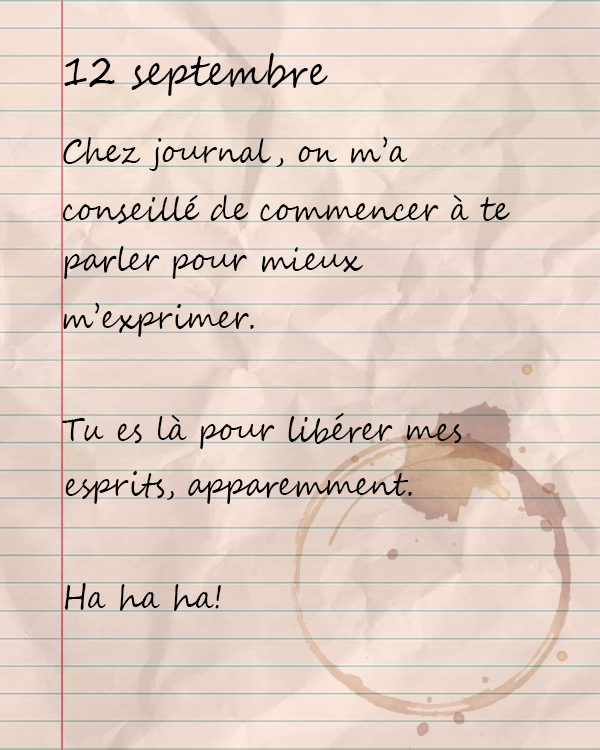
<style>
.page{position:relative;width:600px;height:750px}
.page>*{position:absolute;margin:0}
.t1{font:41.8px "SegoeScript";color:#000000;scale:0.9 1}
.t2{font:33.3px "SegoeScript";color:#000000;scale:0.9 1}
</style>
<div class="page">
<p class="t1" style="left:64px;top:53px;width:264px;height:43px">12 septembre</p>
<p class="t2" style="left:63px;top:136px;width:345px;height:35px">Chez journal, on m’a</p>
<p class="t2" style="left:62px;top:195px;width:448px;height:29px">conseillé de commencer à te</p>
<p class="t2" style="left:64px;top:246px;width:299px;height:33px">parler pour mieux</p>
<p class="t2" style="left:63px;top:302px;width:191px;height:35px">m’exprimer.</p>
<p class="t2" style="left:62px;top:413px;width:400px;height:36px">Tu es là pour libérer mes</p>
<p class="t2" style="left:65px;top:471px;width:347px;height:33px">esprits, apparemment.</p>
<p class="t2" style="left:64px;top:583px;width:157px;height:28px">Ha ha ha!</p>
</div>
